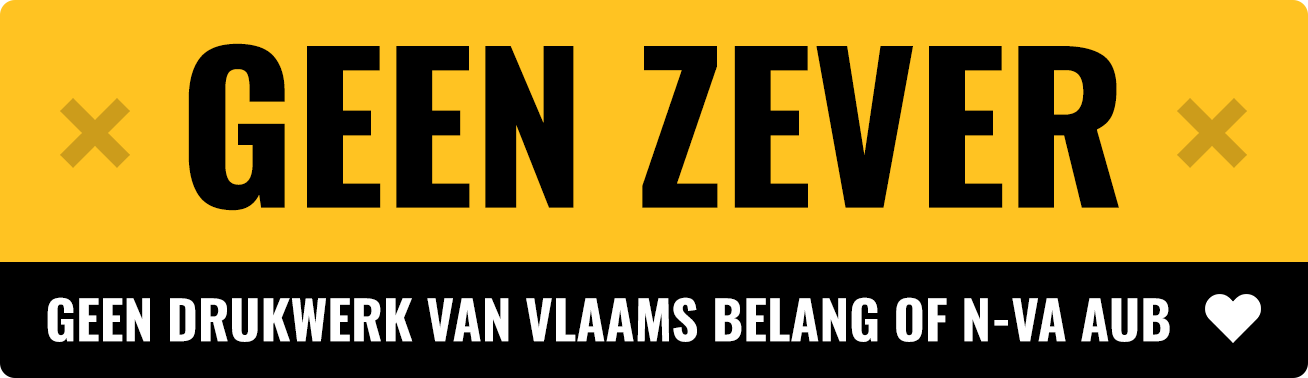
<style>
.page{position:relative;width:1308px;height:378px;background:#ffc322}
.page>*{position:absolute;margin:0}
.t1{font:199.5px "Oswald-Bold";color:#000000}
.t2{font:53px "Oswald-Bold";color:#ffffff}
</style>
<div class="page">
<p class="t1" style="left:188px;top:43px;width:931px;height:168px">GEEN ZEVER</p>
<p class="t2" style="left:47px;top:297px;width:1123px;height:45px">GEEN DRUKWERK VAN VLAAMS BELANG OF N-VA AUB</p>
</div>
